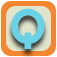
<style>
.page{position:relative;width:57px;height:57px;background:#f38630}
.page>*{position:absolute;margin:0}
.t1{font:48px "Chalet-NewYorkNineteenSeventy";color:#69d2e7;text-transform:uppercase;font-weight:bold}
</style>
<div class="page">
<p class="t1" style="left:11px;top:8px;width:34px;height:41px">Q</p>
</div>
